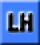
<style>
.page{position:relative;width:40px;height:45px;background:#4080ff}
.page>*{position:absolute;margin:0}
.t1{font:24px "GothicXB-HM"}
</style>
<div class="page">
<p class="t1" style="left:8px;top:13px;width:24px;height:18px">LH</p>
</div>
